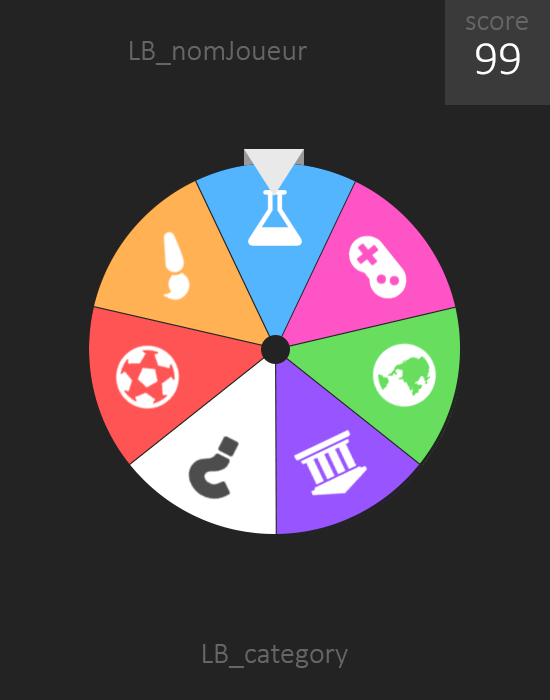
<style>
.page{position:relative;width:550px;height:700px;background:#232323}
.page>*{position:absolute;margin:0}
.t1{font:30px "Calibri-Light";color:#676565}
.t2{font:48px "Calibri-Light";color:#ffffff}
</style>
<div class="page">
<p class="t1" style="left:466px;top:16px;width:62px;height:14px">score</p>
<p class="t1" style="left:130px;top:41px;width:177px;height:24px">LB_nomJoueur</p>
<p class="t2" style="left:476px;top:43px;width:44px;height:32px">99</p>
<p class="t1" style="left:203px;top:644px;width:145px;height:24px">LB_category</p>
</div>
